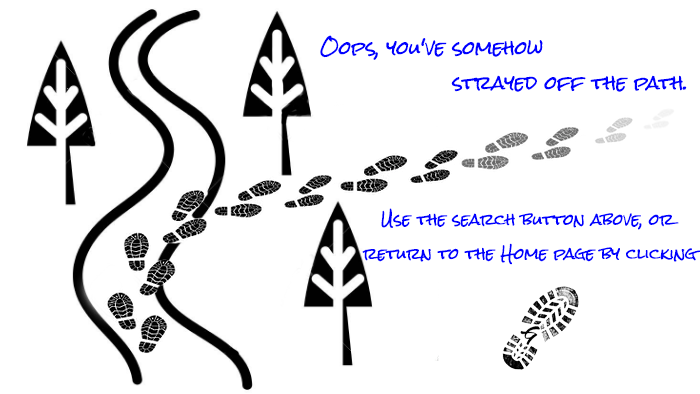
<style>
.page{position:relative;width:700px;height:394px;background:#ffffff}
.page>*{position:absolute;margin:0}
.t1{font:18px "RockSalt-Regular";color:#0000ff}
.t2{font:15px "RockSalt-Regular";color:#0000ff}
</style>
<div class="page">
<p class="t1" style="left:320px;top:35px;width:223px;height:25px">Oops, you've somehow</p>
<p class="t1" style="left:451px;top:75px;width:236px;height:17px">strayed off the path.</p>
<p class="t2" style="left:381px;top:208px;width:298px;height:22px">Use the search button above, or</p>
<p class="t2" style="left:362px;top:243px;width:339px;height:22px">return to the Home page by clicking</p>
</div>
